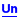
<style>
.page{position:relative;width:19px;height:19px;background:#ffffff}
.page>*{position:absolute;margin:0}
.t1{font:12px "GothamHTF-Bold";color:#0000ff}
</style>
<div class="page">
<p class="t1" style="left:2px;top:4px;width:16px;height:9px">Un</p>
</div>
